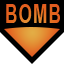
<style>
.page{position:relative;width:64px;height:64px;background:#000000}
.page>*{position:absolute;margin:0}
.t1{font:26.2px "ArialNarrow-Bold";letter-spacing:0.05em;color:#e36620;scale:0.8 1}
</style>
<div class="page">
<p class="t1" style="left:6px;top:4px;width:54px;height:19px">BOMB</p>
</div>
